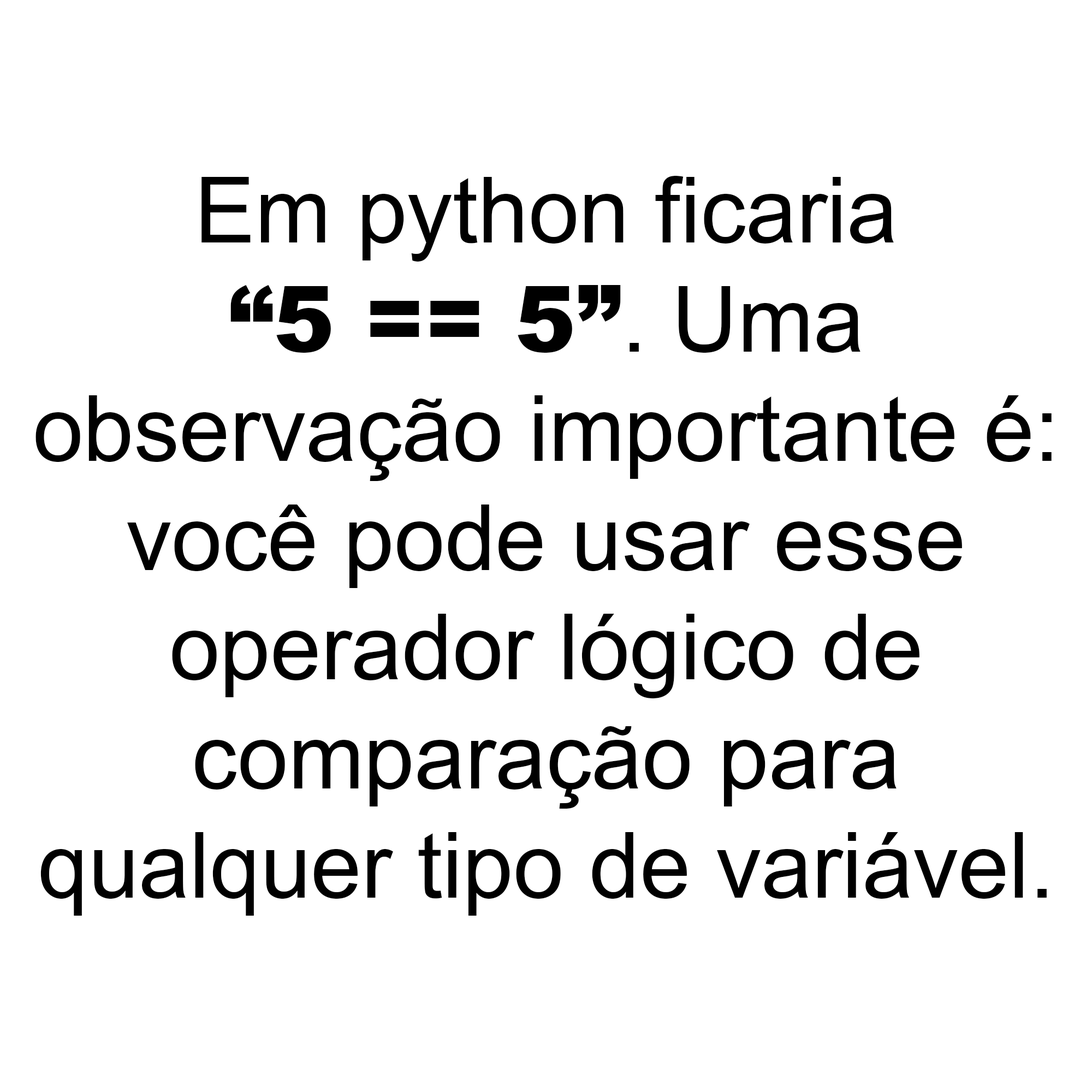
<style>
.page{position:relative;width:1092px;height:1092px;background:#ffffff}
.page>*{position:absolute;margin:0}
.t1{font:91px "ArialMT";color:#000000}
.t2{font:91px "Arial-Black";color:#000000}
</style>
<div class="page">
<p class="t1" style="left:35px;top:176px;width:1017px;height:740px;text-align:center">Em python ficaria<br><span class="t2">“5 == 5”</span>. Uma<br>observação importante é:<br>você pode usar esse<br>operador lógico de<br>comparação para<br>qualquer tipo de variável.</p>
</div>
